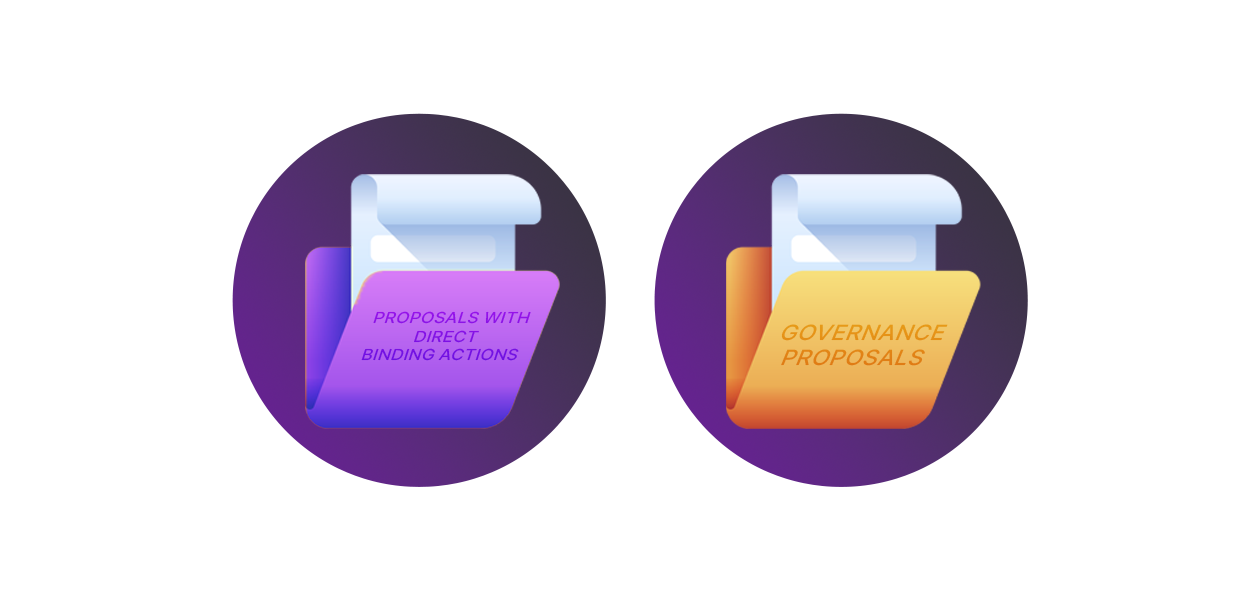
<style>
.page{position:relative;width:1240px;height:600px;background:#ffffff}
.page>*{position:absolute;margin:0}
.t1{font:16px "Inter-Medium";color:#8211e4;text-transform:uppercase;scale:1.08 1}
.t2{font:22.6px "Inter-Medium";color:#e48f16;text-transform:uppercase;scale:1.03 1}
</style>
<div class="page">
<p class="t1" style="left:361px;top:311px;width:170px;height:50px;text-align:center">proposals with <br>direct <br>binding actions</p>
<p class="t2" style="left:781px;top:324px;width:167px;height:42px;text-align:center">governance proposals</p>
</div>
